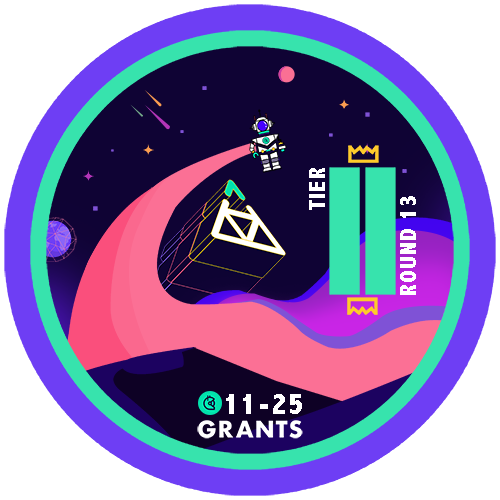
<style>
.page{position:relative;width:500px;height:500px;background:#ffffff}
.page>*{position:absolute;margin:0}
.t1{font:23.7px "AbadiMT-CondensedExtraBold";letter-spacing:0.05em;color:#ffffff}
.t2{font:30.9px "AbadiMT-CondensedExtraBold";letter-spacing:0.05em;color:#ffffff}
</style>
<div class="page">
<p class="t1" style="left:309px;top:168px;width:16px;height:42px;rotate:-90deg">TIER</p>
<p class="t1" style="left:400px;top:196px;width:16px;height:99px;rotate:-90deg">ROUND 13</p>
<p class="t2" style="left:226px;top:394px;width:76px;height:20px">11-25</p>
</div>
